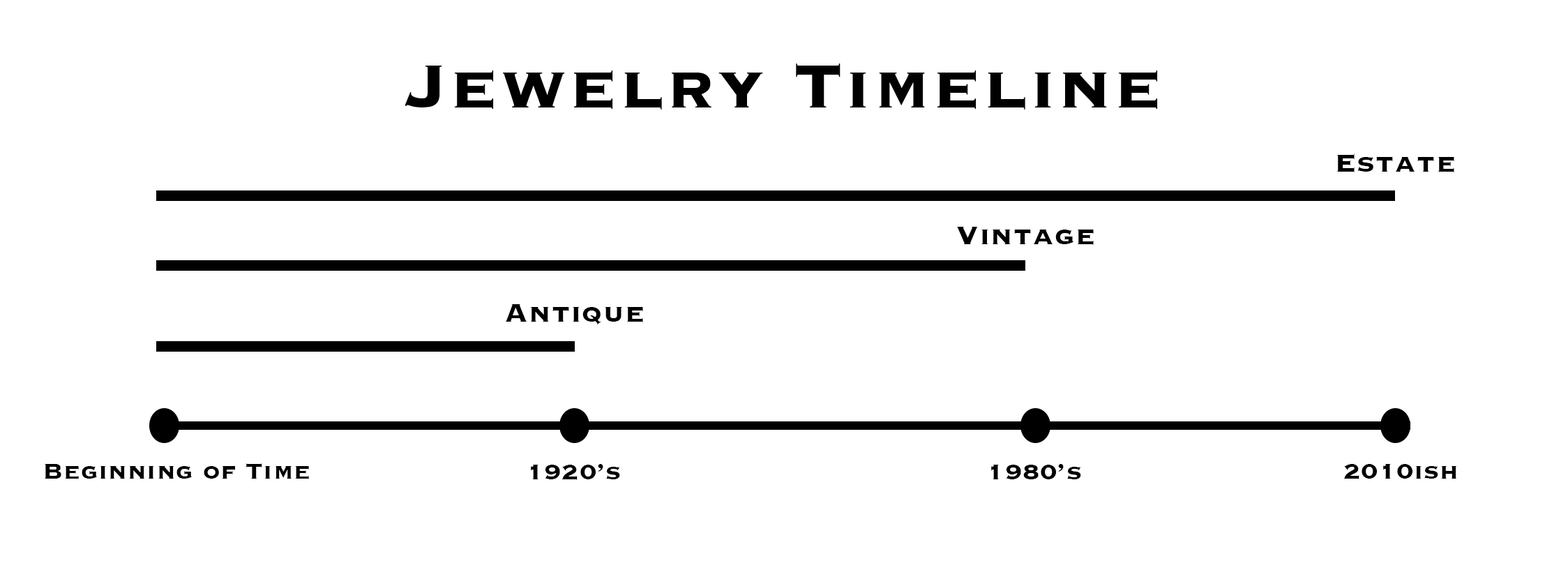
<style>
.page{position:relative;width:1568px;height:577px;background:#ffffff}
.page>*{position:absolute;margin:0}
.t1{font:79.8px "Copperplate-Bold";letter-spacing:0.025em;color:#010000}
.t2{font:32.6px "Copperplate-Bold";letter-spacing:0.025em;color:#000000}
.t3{font:27.7px "Copperplate-Bold";letter-spacing:0.025em;color:#010000}
</style>
<div class="page">
<p class="t1" style="left:405px;top:63px;width:753px;height:47px">Jewelry Timeline</p>
<p class="t2" style="left:1336px;top:153px;width:118px;height:19px">Estate</p>
<p class="t2" style="left:957px;top:227px;width:137px;height:18px">Vintage</p>
<p class="t2" style="left:505px;top:304px;width:138px;height:20px">Antique</p>
<p class="t3" style="left:45px;top:463px;width:264px;height:16px">Beginning of Time</p>
<p class="t3" style="left:531px;top:464px;width:89px;height:16px">1920’s</p>
<p class="t3" style="left:991px;top:464px;width:90px;height:15px">1980’s</p>
<p class="t3" style="left:1344px;top:464px;width:113px;height:15px">2010ish</p>
</div>
